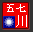
<style>
.page{position:relative;width:33px;height:32px;background:#f20000}
.page>*{position:absolute;margin:0}
.t1{font:10.4px "SimSun";color:#ffffff}
.t2{font:11.7px "SimSun";color:#ffffff}
</style>
<div class="page">
<p class="t1" style="left:7px;top:4px;width:19px;height:8px">五七</p>
<p class="t2" style="left:16px;top:15px;width:11px;height:12px">川</p>
</div>
